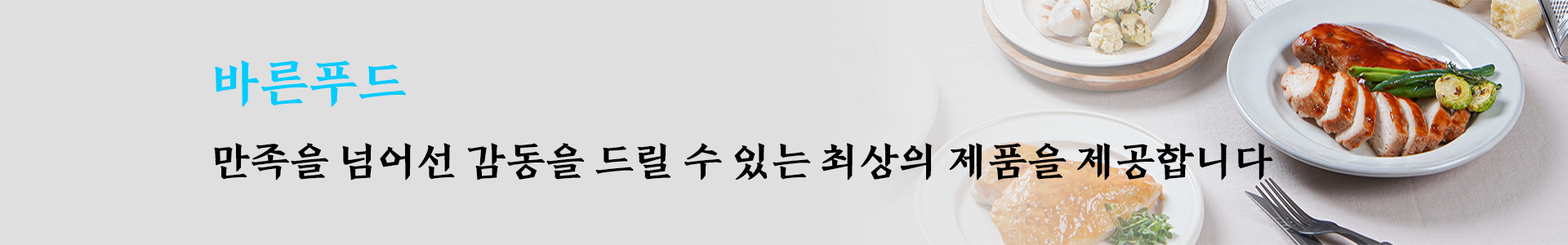
<style>
.page{position:relative;width:1568px;height:245px;background:#dfdfdf}
.page>*{position:absolute;margin:0}
.t1{font:49px "TSTJJWanGakB";color:#00ccff}
.t2{font:39.2px "TSTJJWanGakB";color:#000000}
</style>
<div class="page">
<p class="t1" style="left:215px;top:60px;width:191px;height:47px">바른푸드</p>
<p class="t2" style="left:214px;top:143px;width:1059px;height:37px">만족을 넘어선 감동을 드릴 수 있는 최상의 제품을 제공합니다</p>
</div>
